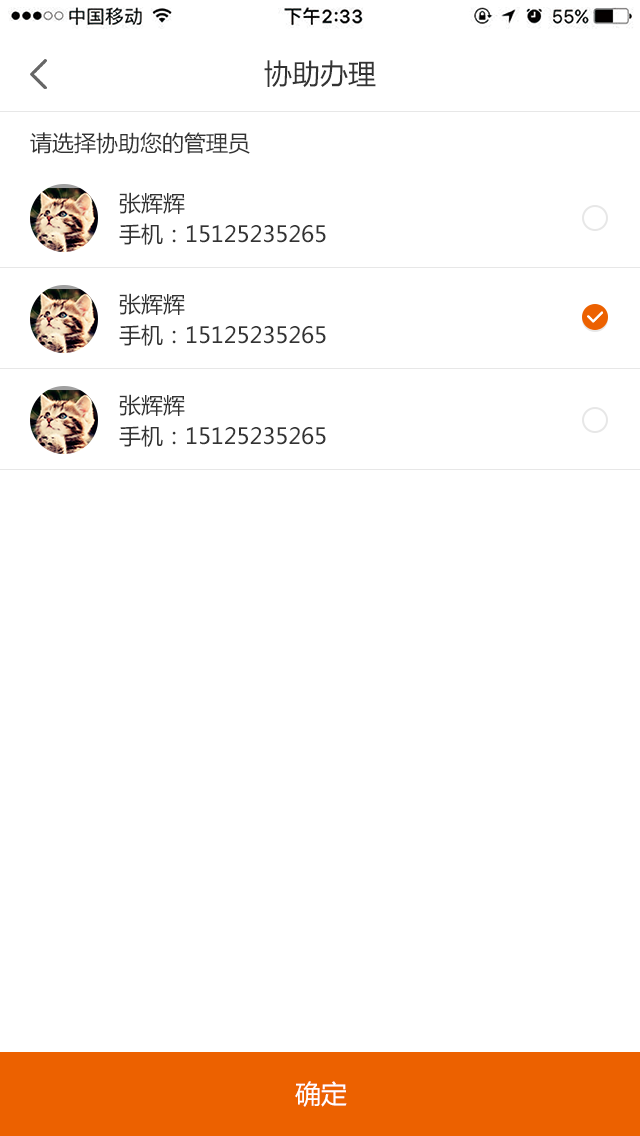
<style>
.page{position:relative;width:640px;height:1136px;background:#ffffff}
.page>*{position:absolute;margin:0}
.t1{font:28px "MicrosoftYaHei";color:#333333}
.t2{font:22px "MicrosoftYaHei";color:#333333}
.t3{font:26px "MicrosoftYaHei";color:#ffffff}
</style>
<div class="page">
<p class="t1" style="left:264px;top:60px;width:112px;height:28px">协助办理</p>
<p class="t2" style="left:30px;top:132px;width:220px;height:22px">请选择协助您的管理员</p>
<p class="t2" style="left:119px;top:192px;width:66px;height:22px">张辉辉</p>
<p class="t2" style="left:119px;top:223px;width:207px;height:22px">手机：15125235265</p>
<p class="t2" style="left:119px;top:293px;width:66px;height:22px">张辉辉</p>
<p class="t2" style="left:119px;top:324px;width:207px;height:22px">手机：15125235265</p>
<p class="t2" style="left:119px;top:394px;width:66px;height:22px">张辉辉</p>
<p class="t2" style="left:119px;top:425px;width:207px;height:22px">手机：15125235265</p>
<p class="t3" style="left:295px;top:1081px;width:52px;height:26px">确定</p>
</div>
